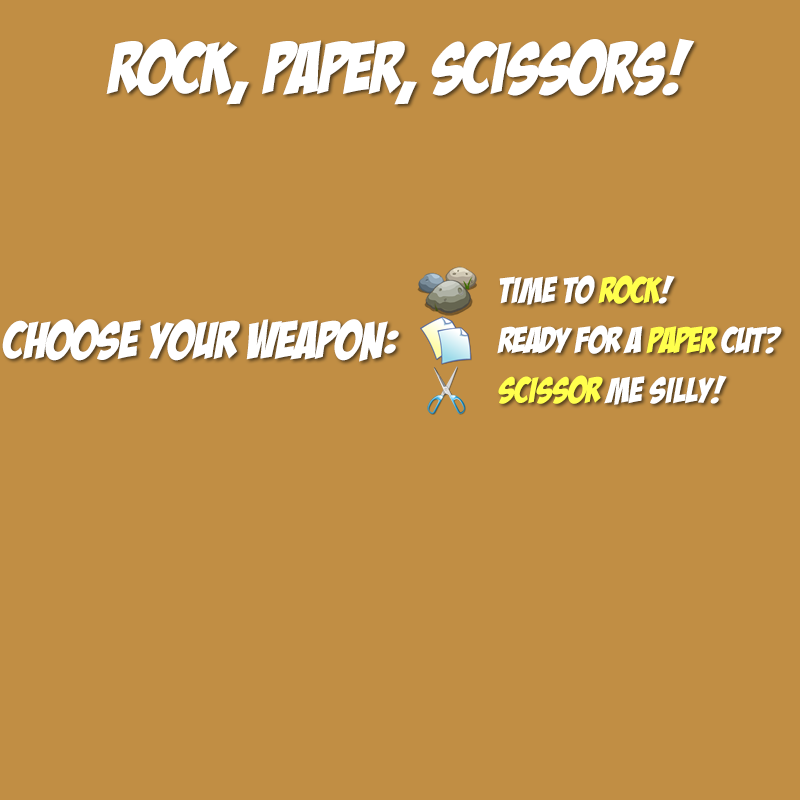
<style>
.page{position:relative;width:800px;height:800px;background:#c18e44}
.page>*{position:absolute;margin:0}
.t1{font:72px "BadaBoomBB";color:#ffffff}
.t2{font:36px "BadaBoomBB";color:#ffffff}
.t3{font:36px "BadaBoomBB";color:#ffff4d}
.t4{font:52px "BadaBoomBB";color:#ffffff}
</style>
<div class="page">
<p class="t1" style="left:106px;top:38px;width:589px;height:67px">Rock, Paper, Scissors!</p>
<p class="t2" style="left:499px;top:275px;width:176px;height:30px">Time to <span class="t3">Rock</span>!</p>
<p class="t4" style="left:2px;top:319px;width:397px;height:43px">Choose your Weapon:</p>
<p class="t2" style="left:497px;top:325px;width:285px;height:29px">Ready for a <span class="t3">paper</span> cut?</p>
<p class="t2" style="left:498px;top:375px;width:229px;height:30px"><span class="t3">Scissor</span> me Silly!</p>
</div>
